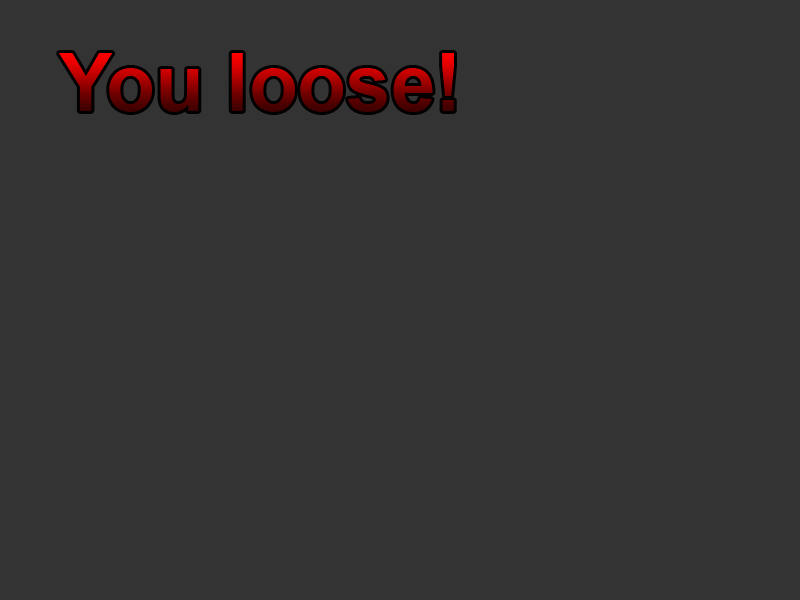
<style>
.page{position:relative;width:800px;height:600px;background:#333333}
.page>*{position:absolute;margin:0}
.t1{font:80px "Arial-BoldMT"}
</style>
<div class="page">
<p class="t1" style="left:59px;top:53px;width:395px;height:59px">You loose!</p>
</div>
